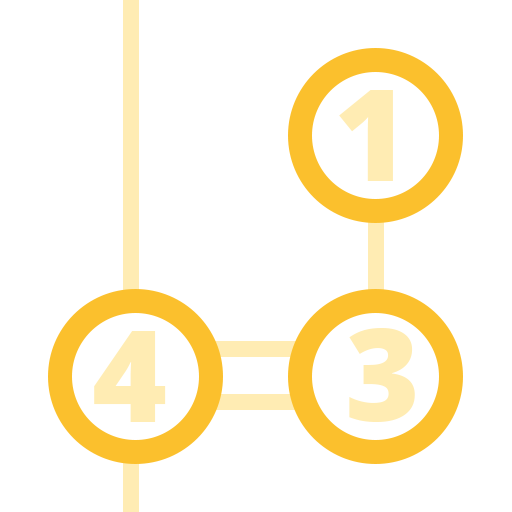
<style>
.page{position:relative;width:512px;height:512px;background:#ffffff}
.page>*{position:absolute;margin:0}
.t1{font:128px "OpenSans-Extrabold";color:#ffecb3}
</style>
<div class="page">
<p class="t1" style="left:339px;top:90px;width:54px;height:91px">1</p>
<p class="t1" style="left:349px;top:328px;width:66px;height:94px">3</p>
<p class="t1" style="left:94px;top:331px;width:72px;height:91px">4</p>
</div>
